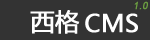
<style>
.page{position:relative;width:150px;height:40px;background:#333333}
.page>*{position:absolute;margin:0}
.t1{font:10px "ArialMT";color:#6b9f40;font-weight:bold;font-style:italic}
.t2{font:24px "MicrosoftYaHei";color:#ffffff;font-weight:bold}
</style>
<div class="page">
<p class="t1" style="left:134px;top:1px;width:14px;height:9px">1.0</p>
<p class="t2" style="left:30px;top:10px;width:50px;height:24px">西格</p>
<p class="t2" style="left:85px;top:13px;width:53px;height:20px">CMS</p>
</div>
